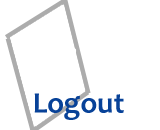
<style>
.page{position:relative;width:160px;height:130px;background:#ffffff}
.page>*{position:absolute;margin:0}
.t1{font:30px "Candara-Bold";color:#084298}
</style>
<div class="page">
<p class="t1" style="left:34px;top:93px;width:90px;height:27px">Logout</p>
</div>
